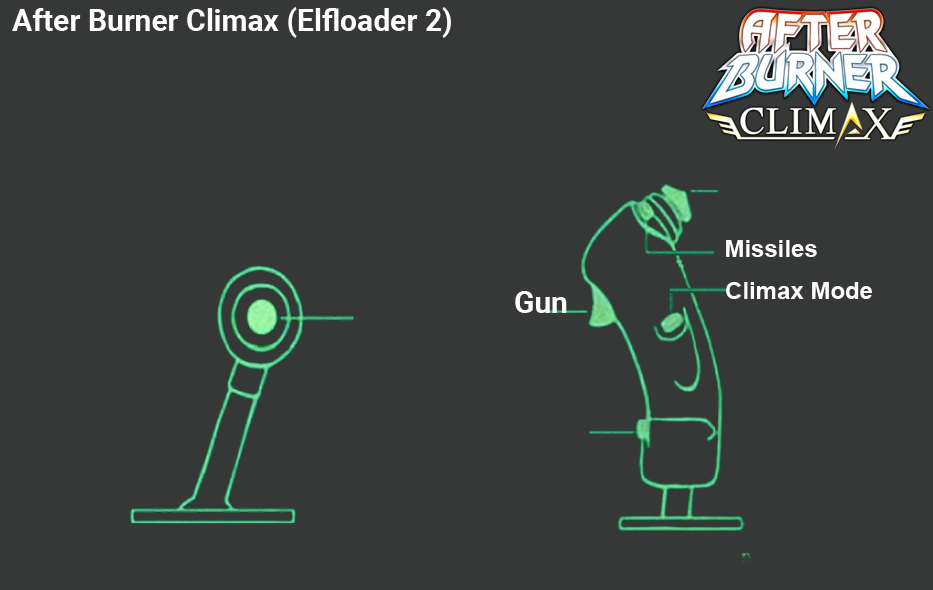
<style>
.page{position:relative;width:933px;height:590px;background:#363838}
.page>*{position:absolute;margin:0}
.t1{font:30px "Roboto-Bold";color:#ffffff}
.t2{font:24px "Arial-BoldMT";color:#fefefe}
</style>
<div class="page">
<p class="t1" style="left:12px;top:7px;width:439px;height:31px">After Burner Climax (Elfloader 2)</p>
<p class="t2" style="left:726px;top:240px;width:91px;height:17px">Missiles</p>
<p class="t1" style="left:515px;top:291px;width:52px;height:22px">Gun</p>
<p class="t2" style="left:726px;top:282px;width:146px;height:17px">Climax Mode</p>
</div>
